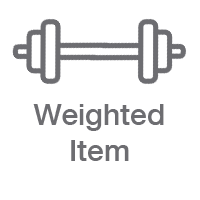
<style>
.page{position:relative;width:200px;height:200px;background:#ffffff}
.page>*{position:absolute;margin:0}
.t1{font:30px "HelveticaNeue-Medium";color:#6d6d71}
</style>
<div class="page">
<p class="t1" style="left:33px;top:104px;width:131px;height:57px;text-align:center">Weighted<br>Item</p>
</div>
